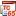
<style>
.page{position:relative;width:16px;height:16px}
.page>*{position:absolute;margin:0}
.t1{font:6px "Arial-BoldItalicMT";color:#ff3401}
.t2{font:7px "Arial-BoldItalicMT";color:#ff3401}
</style>
<div class="page">
<p class="t1" style="left:3px;top:5px;width:8px;height:6px">TC</p>
<p class="t2" style="left:7px;top:10px;width:9px;height:7px">65</p>
</div>
